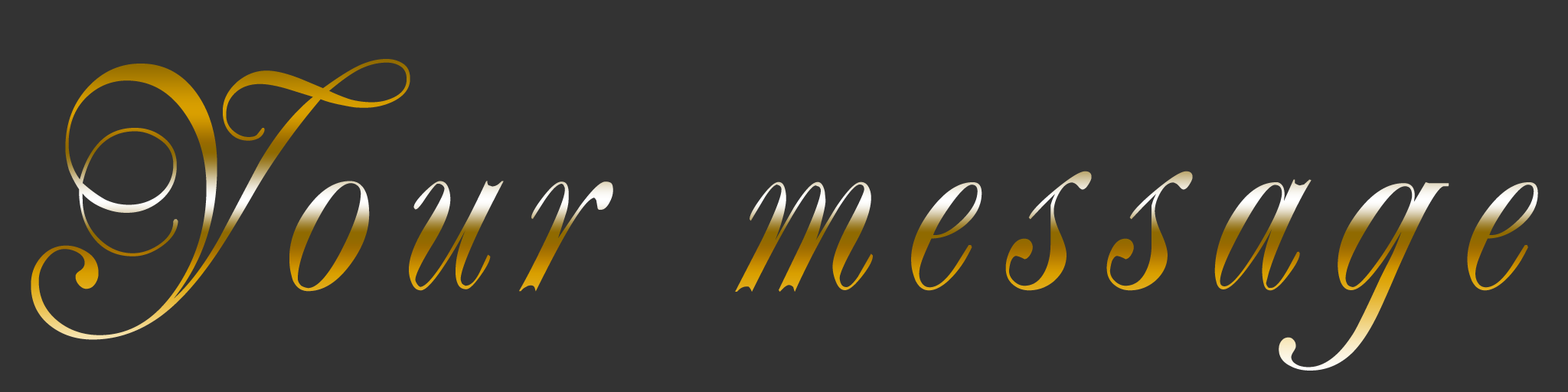
<style>
.page{position:relative;width:1568px;height:392px;background:#333333}
.page>*{position:absolute;margin:0}
.t1{font:316.5px "Renaissance-Regular";letter-spacing:0.12em;scale:0.86 1}
</style>
<div class="page">
<p class="t1" style="left:31px;top:59px;width:1507px;height:312px">Your message</p>
</div>
